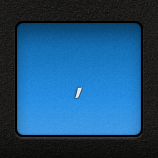
<style>
.page{position:relative;width:158px;height:158px}
.page>*{position:absolute;margin:0}
.t1{font:42px "MyriadPro-Regular";color:#e7e9ec}
</style>
<div class="page">
<p class="t1" style="left:75px;top:87px;width:7px;height:11px">,</p>
</div>
